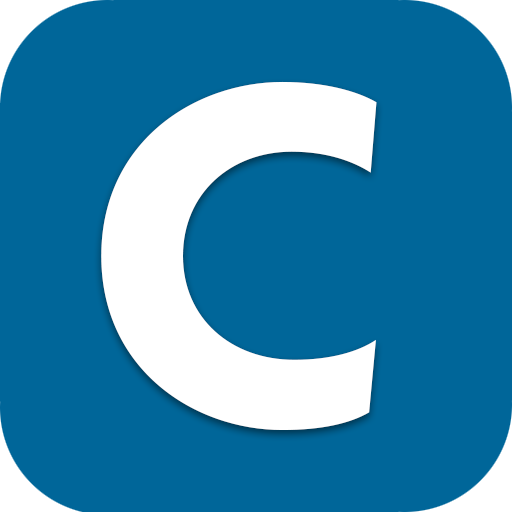
<style>
.page{position:relative;width:512px;height:512px;background:#006699}
.page>*{position:absolute;margin:0}
.t1{font:520px "Agenda-Bold";color:#ffffff}
</style>
<div class="page">
<p class="t1" style="left:101px;top:81px;width:276px;height:349px">C</p>
</div>
